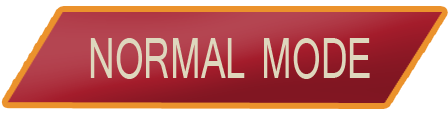
<style>
.page{position:relative;width:448px;height:113px}
.page>*{position:absolute;margin:0}
.t1{font:59.7px "Shruti";color:#ded7bd;scale:0.67 1}
</style>
<div class="page">
<p class="t1" style="left:90px;top:38px;width:280px;height:41px">NORMAL MODE</p>
</div>
